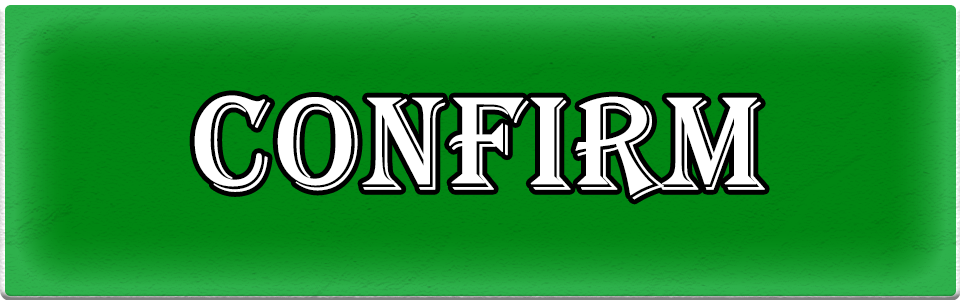
<style>
.page{position:relative;width:960px;height:300px}
.page>*{position:absolute;margin:0}
.t1{font:136.5px "Algerian";color:#ffffff;font-weight:bold}
</style>
<div class="page">
<p class="t1" style="left:194px;top:95px;width:571px;height:105px">cONFIRM</p>
</div>
